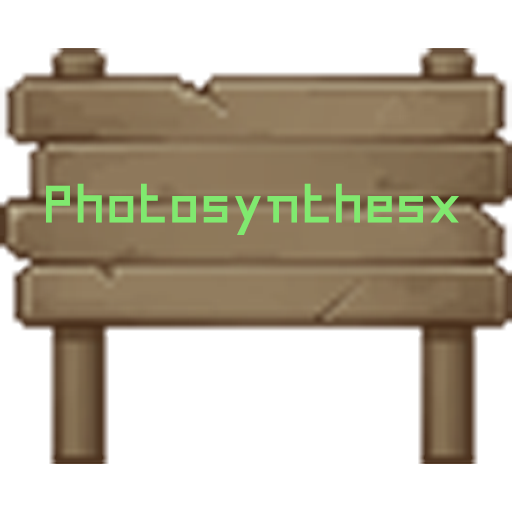
<style>
.page{position:relative;width:512px;height:512px;background:#ffffff}
.page>*{position:absolute;margin:0}
.t1{font:50px "AMOceanus-Bold";letter-spacing:0.1em;color:#80e96f}
</style>
<div class="page">
<p class="t1" style="left:46px;top:183px;width:413px;height:52px">Photosynthesx</p>
</div>
